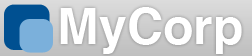
<style>
.page{position:relative;width:252px;height:56px}
.page>*{position:absolute;margin:0}
.t1{font:50px "Helvetica-Bold";color:#ffffff}
</style>
<div class="page">
<p class="t1" style="left:60px;top:7px;width:182px;height:47px">MyCorp</p>
</div>
